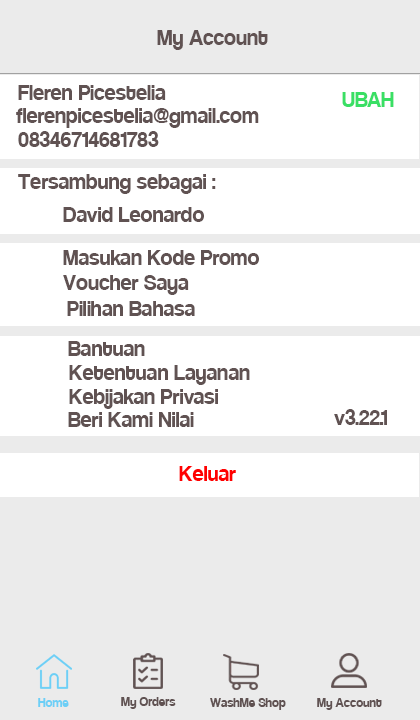
<style>
.page{position:relative;width:420px;height:720px;background:#ffffff}
.page>*{position:absolute;margin:0}
.t1{font:24px "Coolvetica-Regular";color:#605252}
.t2{font:24px "Coolvetica-Regular";color:#39df64}
.t3{font:24px "Coolvetica-Regular";color:#ff0000}
.t4{font:14px "Coolvetica-Regular";color:#6dcff6}
.t5{font:14px "Coolvetica-Regular";color:#605252}
</style>
<div class="page">
<p class="t1" style="left:157px;top:30px;width:111px;height:20px">My Account</p>
<p class="t1" style="left:18px;top:85px;width:148px;height:15px">Fleren Picestelia</p>
<p class="t2" style="left:342px;top:92px;width:52px;height:15px">UBAH</p>
<p class="t1" style="left:16px;top:108px;width:243px;height:20px">flerenpicestelia@gmail.com</p>
<p class="t1" style="left:18px;top:131px;width:141px;height:16px">08346714681783</p>
<p class="t1" style="left:18px;top:174px;width:198px;height:20px">Tersambung sebagai :</p>
<p class="t1" style="left:63px;top:207px;width:141px;height:15px">David Leonardo</p>
<p class="t1" style="left:63px;top:250px;width:196px;height:15px">Masukan Kode Promo</p>
<p class="t1" style="left:63px;top:275px;width:126px;height:20px">Voucher Saya</p>
<p class="t1" style="left:67px;top:301px;width:128px;height:15px">Pilihan Bahasa</p>
<p class="t1" style="left:68px;top:341px;width:77px;height:15px">Bantuan</p>
<p class="t1" style="left:69px;top:365px;width:181px;height:20px">Ketentuan Layanan</p>
<p class="t1" style="left:69px;top:389px;width:149px;height:20px">Kebijakan Privasi</p>
<p class="t1" style="left:68px;top:412px;width:126px;height:15px">Beri Kami Nilai</p>
<p class="t1" style="left:334px;top:409px;width:53px;height:16px">v3.22.1</p>
<p class="t3" style="left:179px;top:466px;width:57px;height:15px">Keluar</p>
<p class="t4" style="left:38px;top:698px;width:31px;height:9px">Home</p>
<p class="t5" style="left:121px;top:697px;width:55px;height:12px">My Orders</p>
<p class="t5" style="left:210px;top:698px;width:76px;height:12px">WashMe Shop</p>
<p class="t5" style="left:317px;top:698px;width:65px;height:12px">My Account</p>
</div>
